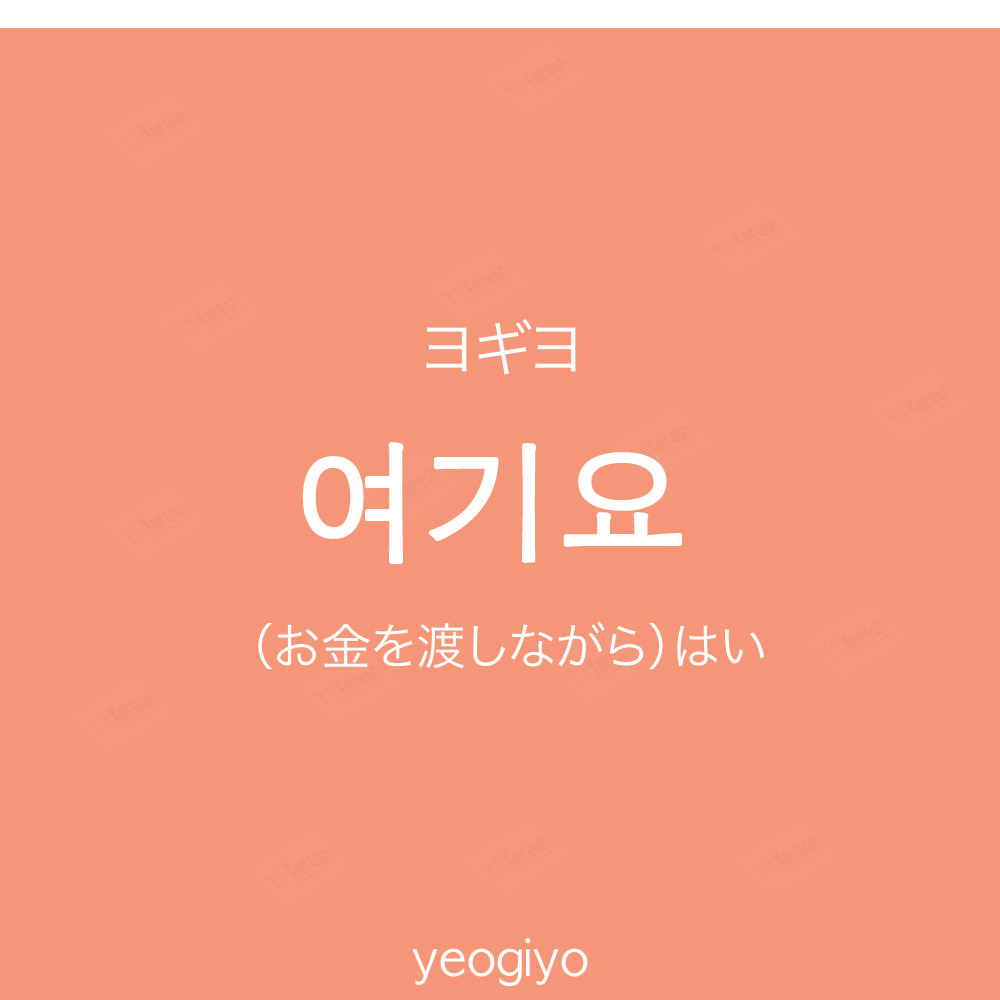
<style>
.page{position:relative;width:1000px;height:1000px;background:#f69679}
.page>*{position:absolute;margin:0}
.t1{font:60px "HiraKakuProN-W3";color:#ffffff;text-transform:uppercase}
.t2{font:130px "AppleGothic";color:#ffffff;font-weight:bold}
.t3{font:50px "HiraKakuProN-W3";color:#ffffff}
.t4{font:50px "AppleGothic";color:#ffffff}
</style>
<div class="page">
<p class="t1" style="left:426px;top:319px;width:150px;height:56px">ヨギヨ</p>
<p class="t2" style="left:302px;top:442px;width:380px;height:122px">여기요</p>
<p class="t3" style="left:258px;top:621px;width:506px;height:49px">（お金を渡しながら）はい</p>
<p class="t4" style="left:412px;top:938px;width:176px;height:49px">yeogiyo</p>
</div>
